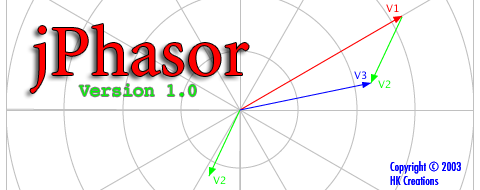
<style>
.page{position:relative;width:480px;height:190px;background:#ffffff}
.page>*{position:absolute;margin:0}
.t1{font:72px "Minion-Regular";color:#ff0000}
.t2{font:18px "Courier";color:#00ff00}
.t3{font:12px "Futura-CondensedMedium";color:#0000ff}
</style>
<div class="page">
<p class="t1" style="left:30px;top:24px;width:219px;height:69px">jPhasor</p>
<p class="t2" style="left:79px;top:84px;width:117px;height:13px">Version 1.0</p>
<p class="t3" style="left:390px;top:161px;width:71px;height:24px">Copyright © 2003<br>HK Creations</p>
</div>
